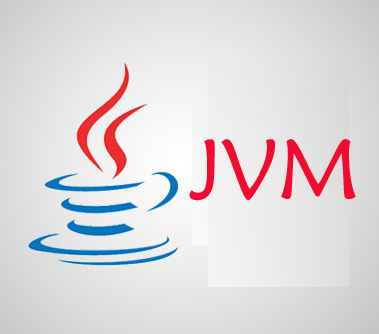
<style>
.page{position:relative;width:379px;height:334px}
.page>*{position:absolute;margin:0}
.t1{font:85px "STXinwei";color:#f20a31}
</style>
<div class="page">
<p class="t1" style="left:189px;top:139px;width:167px;height:62px">JVM</p>
</div>
